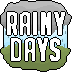
<style>
.page{position:relative;width:72px;height:72px;background:#ffffff}
.page>*{position:absolute;margin:0}
.t1{font:30px/26px "BigNoodleTitling";letter-spacing:0.03em;color:#ffffff;font-weight:bold}
</style>
<div class="page">
<p class="t1" style="left:7px;top:12px;width:58px;height:49px;text-align:center">Rainy<br>Days</p>
</div>
